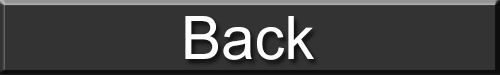
<style>
.page{position:relative;width:500px;height:75px;background:#333333}
.page>*{position:absolute;margin:0}
.t1{font:60px "ArialMT";color:#ffffff}
</style>
<div class="page">
<p class="t1" style="left:185px;top:16px;width:129px;height:44px">Back</p>
</div>
